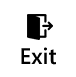
<style>
.page{position:relative;width:76px;height:77px;background:#ffffff}
.page>*{position:absolute;margin:0}
.t1{font:22.5px "YuGothicUI-Semibold";color:#000000}
</style>
<div class="page">
<p class="t1" style="left:21px;top:47px;width:35px;height:18px">Exit</p>
</div>
